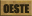
<style>
.page{position:relative;width:32px;height:16px}
.page>*{position:absolute;margin:0}
.t1{font:10.8px "Impact";color:#292110}
</style>
<div class="page">
<p class="t1" style="left:3px;top:4px;width:26px;height:10px">OESTE</p>
</div>
